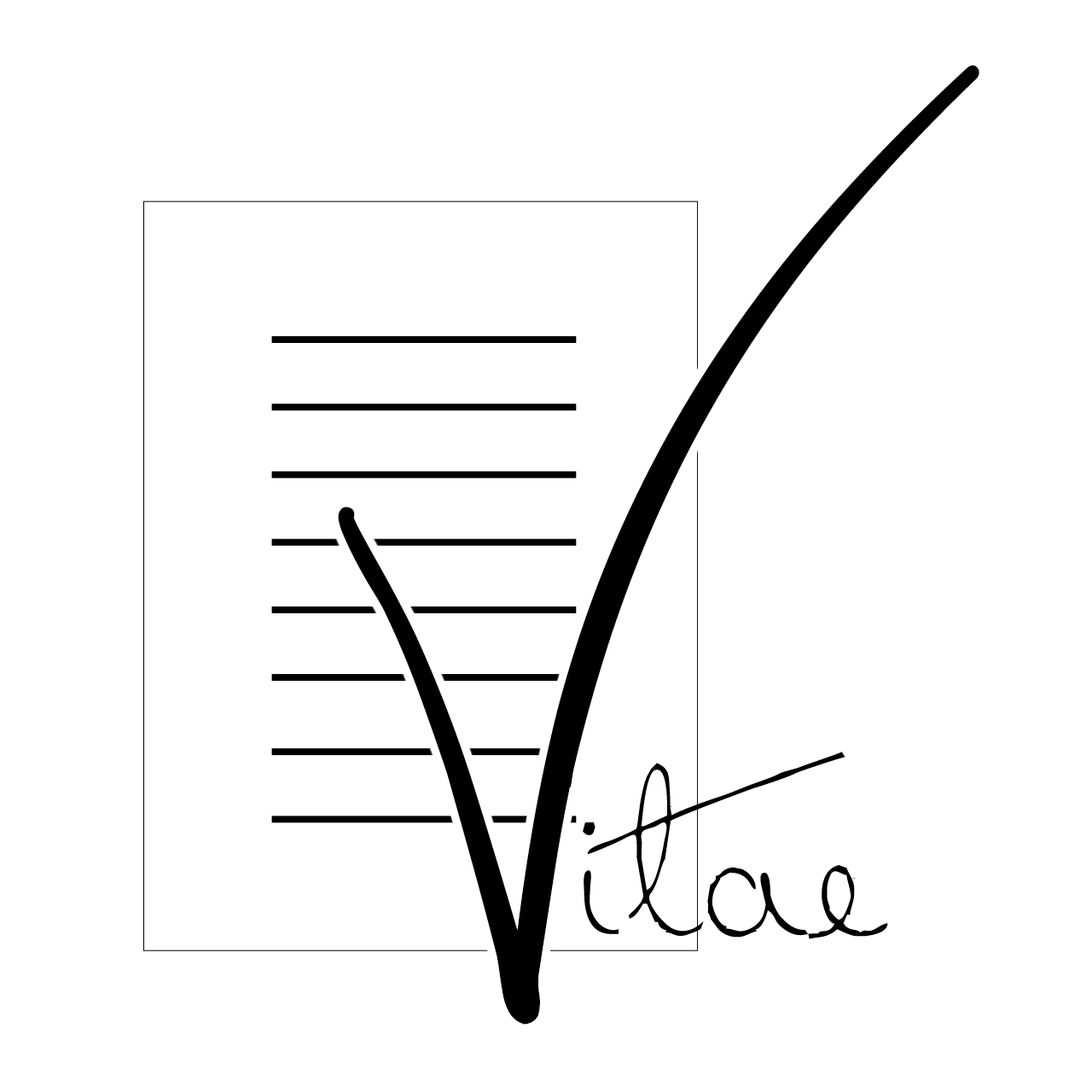
<style>
.page{position:relative;width:1092px;height:1092px;background:#ffffff}
.page>*{position:absolute;margin:0}
.t1{font:974.5px "SweetlyBroken";color:#000000;font-weight:bold}
.t2{font:281.5px "Dreamer";color:#000000;font-weight:bold}
</style>
<div class="page">
<p class="t1" style="left:338px;top:65px;width:641px;height:960px">V</p>
<p class="t2" style="left:583px;top:752px;width:305px;height:187px">itae</p>
</div>
